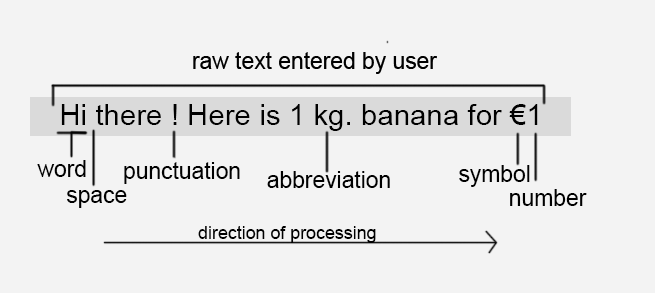
<style>
.page{position:relative;width:655px;height:293px;background:#f3f3f3}
.page>*{position:absolute;margin:0}
.t1{font:29.5px "ArialMT";color:#000000}
.t2{font:22.8px "ArialMT";color:#000000}
.t3{font:17.8px "ArialMT";color:#000000}
</style>
<div class="page">
<p class="t1" style="left:61px;top:104px;width:477px;height:27px">Hi there ! Here is 1 kg. banana for €1</p>
<p class="t2" style="left:37px;top:160px;width:49px;height:17px">word</p>
<p class="t2" style="left:124px;top:162px;width:116px;height:22px">punctuation</p>
<p class="t2" style="left:267px;top:171px;width:123px;height:17px">abbreviation</p>
<p class="t2" style="left:459px;top:165px;width:71px;height:22px">symbol</p>
<p class="t2" style="left:67px;top:190px;width:60px;height:18px">space</p>
<p class="t2" style="left:510px;top:189px;width:77px;height:17px">number</p>
<p class="t3" style="left:198px;top:226px;width:178px;height:17px">direction of processing</p>
</div>
